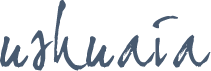
<style>
.page{position:relative;width:211px;height:71px;background:#ffffff}
.page>*{position:absolute;margin:0}
.t1{font:72.7px "JoeHand2";color:#485a70}
</style>
<div class="page">
<p class="t1" style="left:0px;top:0px;width:211px;height:71px">ushuaia</p>
</div>
